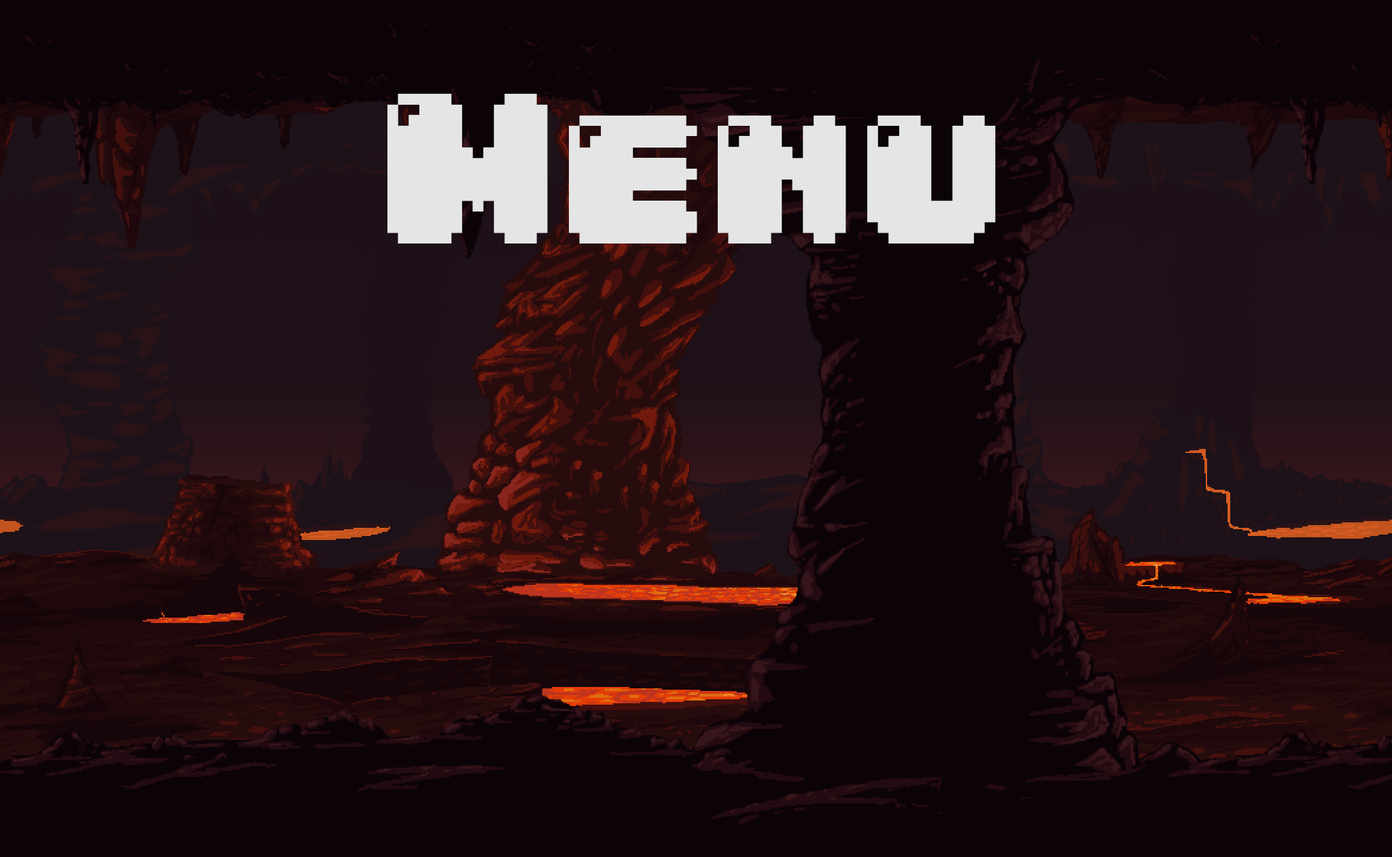
<style>
.page{position:relative;width:1392px;height:857px;background:#0b0307}
.page>*{position:absolute;margin:0}
.t1{font:181.2px "04bRUSBYLYAJKA-30";color:#e5e5e5}
</style>
<div class="page">
<p class="t1" style="left:387px;top:93px;width:609px;height:150px">Menu</p>
</div>
